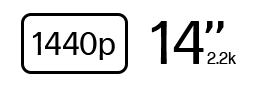
<style>
.page{position:relative;width:259px;height:86px;background:#ffffff}
.page>*{position:absolute;margin:0}
.t1{font:60px "FormaDJRMicro-Regular";color:#000000}
.t2{font:32px "FormaDJRMicro-Regular";color:#000000}
.t3{font:17px "FormaDJRMicro-Regular";color:#000000}
</style>
<div class="page">
<p class="t1" style="left:151px;top:21px;width:73px;height:43px">14’’</p>
<p class="t2" style="left:33px;top:32px;width:82px;height:28px">1440p</p>
<p class="t3" style="left:207px;top:52px;width:29px;height:12px">2.2k</p>
</div>
